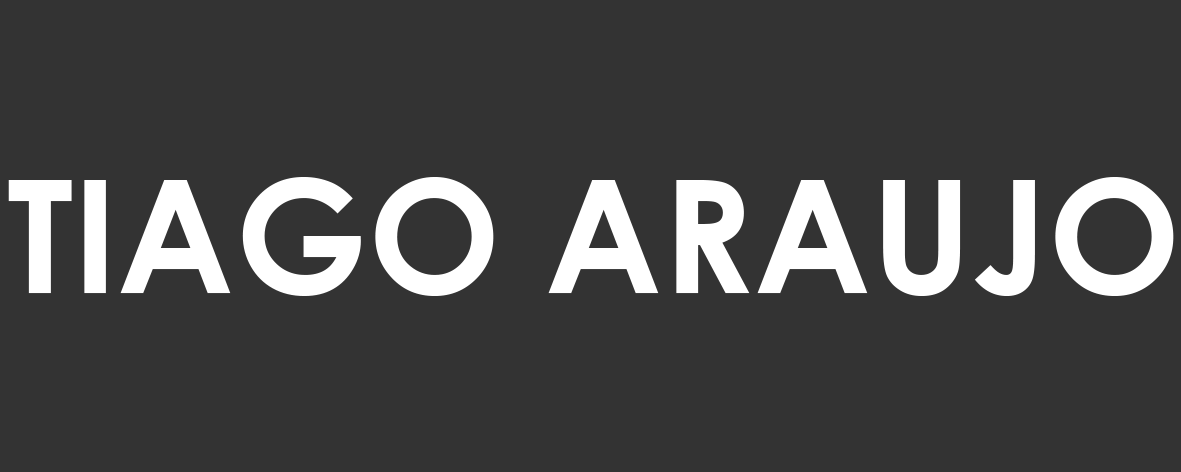
<style>
.page{position:relative;width:1181px;height:472px;background:#333333}
.page>*{position:absolute;margin:0}
.t1{font:158.3px "CenturyGothic-Bold";color:#ffffff}
</style>
<div class="page">
<p class="t1" style="left:8px;top:177px;width:1166px;height:119px">TIAGO ARAUJO</p>
</div>
